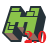
<style>
.page{position:relative;width:48px;height:48px;background:#ffffff}
.page>*{position:absolute;margin:0}
.t1{font:18px "BodoniMT-Bold";color:#ed2024}
</style>
<div class="page">
<p class="t1" style="left:24px;top:31px;width:23px;height:12px">2.0</p>
</div>
